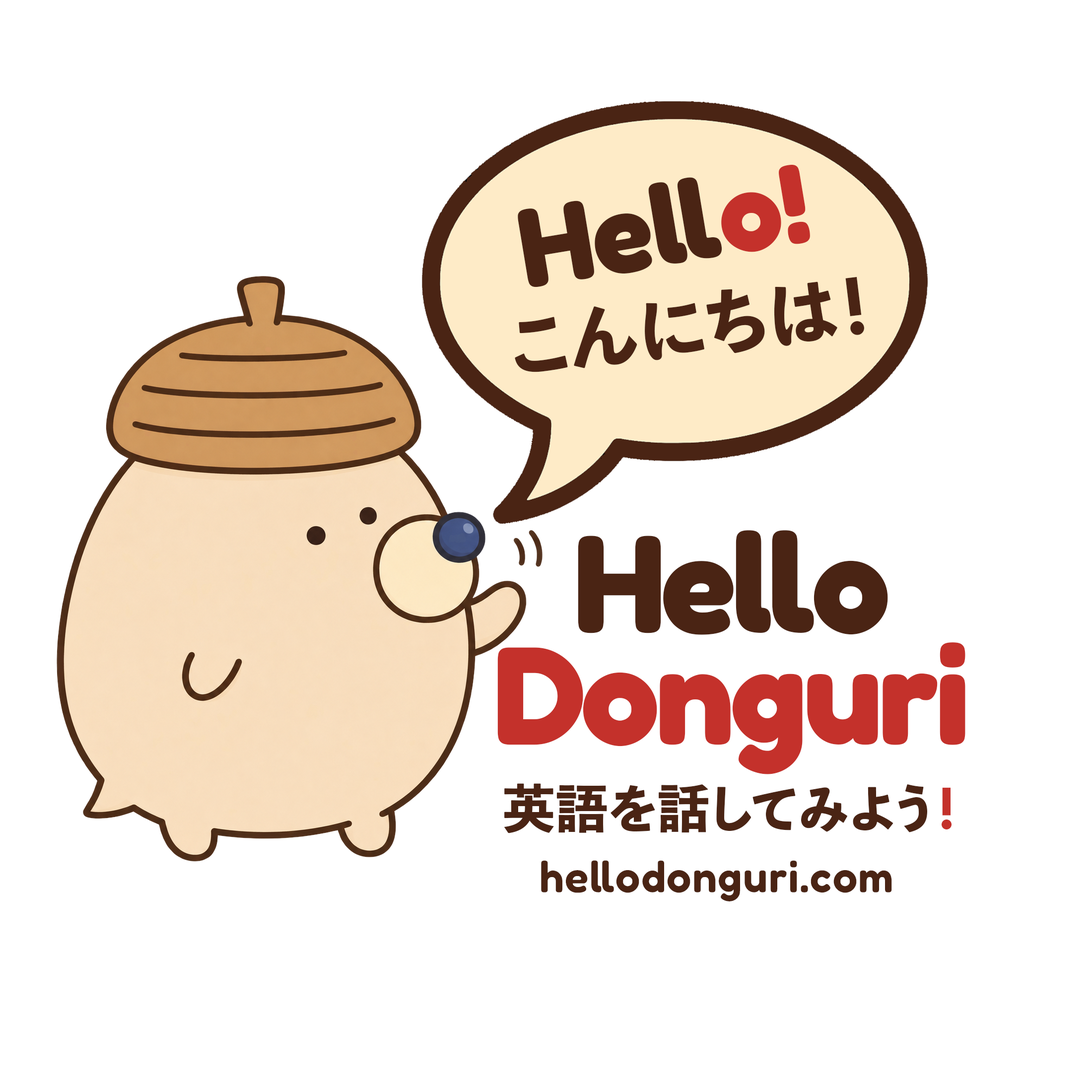
<style>
.page{position:relative;width:1092px;height:1092px;background:#ffffff}
.page>*{position:absolute;margin:0}
.t1{font:112.6px "Fredoka-Bold";color:#4a2414}
.t2{font:112.6px "Fredoka-Bold";color:#c4312b}
.t3{font:71.3px "ToppanBunkyuMidashiGothicStdN-ExtraBold";color:#4a2414}
.t4{font:139px/111.7px "Fredoka-Bold";letter-spacing:-0.025em;color:#c4312b}
.t5{font:139px/111.7px "Fredoka-Bold";letter-spacing:-0.025em;color:#4a2414}
.t6{font:51.6px "ToppanBunkyuMidashiGothicStdN-ExtraBold";letter-spacing:0.025em;color:#4a2414}
.t7{font:51.6px "ToppanBunkyuMidashiGothicStdN-ExtraBold";letter-spacing:0.025em;color:#c4312b}
.t8{font:43.7px "Fredoka-SemiBold";letter-spacing:0.025em;color:#4a2414}
</style>
<div class="page">
<p class="t1" style="left:518px;top:165px;width:292px;height:122px;rotate:-9deg">Hell<span class="t2">o!</span></p>
<p class="t3" style="left:515px;top:276px;width:349px;height:96px;rotate:-7deg">こんにちは！</p>
<p class="t4" style="left:497px;top:530px;width:468px;height:244px;text-align:center"><span class="t5">Hello <br></span>Donguri</p>
<p class="t6" style="left:504px;top:783px;width:448px;height:50px">英語を話してみよう<span class="t7">！</span></p>
<p class="t8" style="left:541px;top:860px;width:351px;height:41px">hellodonguri.com</p>
</div>
